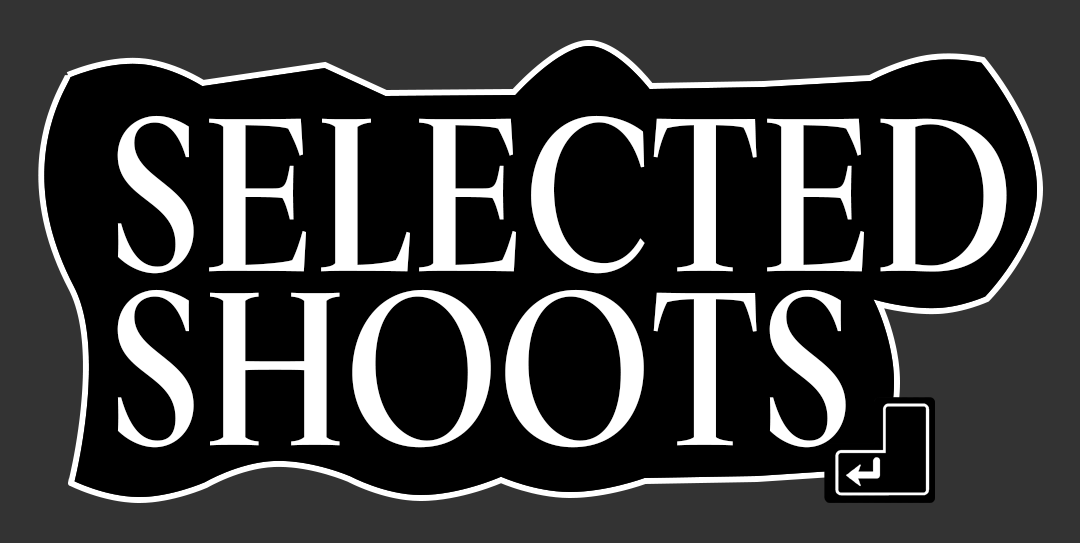
<style>
.page{position:relative;width:1080px;height:543px;background:#000000}
.page>*{position:absolute;margin:0}
.t1{font:217.1px/173.7px "KumlienPro-Condensed";color:#ffffff}
</style>
<div class="page">
<p class="t1" style="left:117px;top:115px;width:890px;height:333px">SELECTED<br>SHOOTS</p>
</div>
